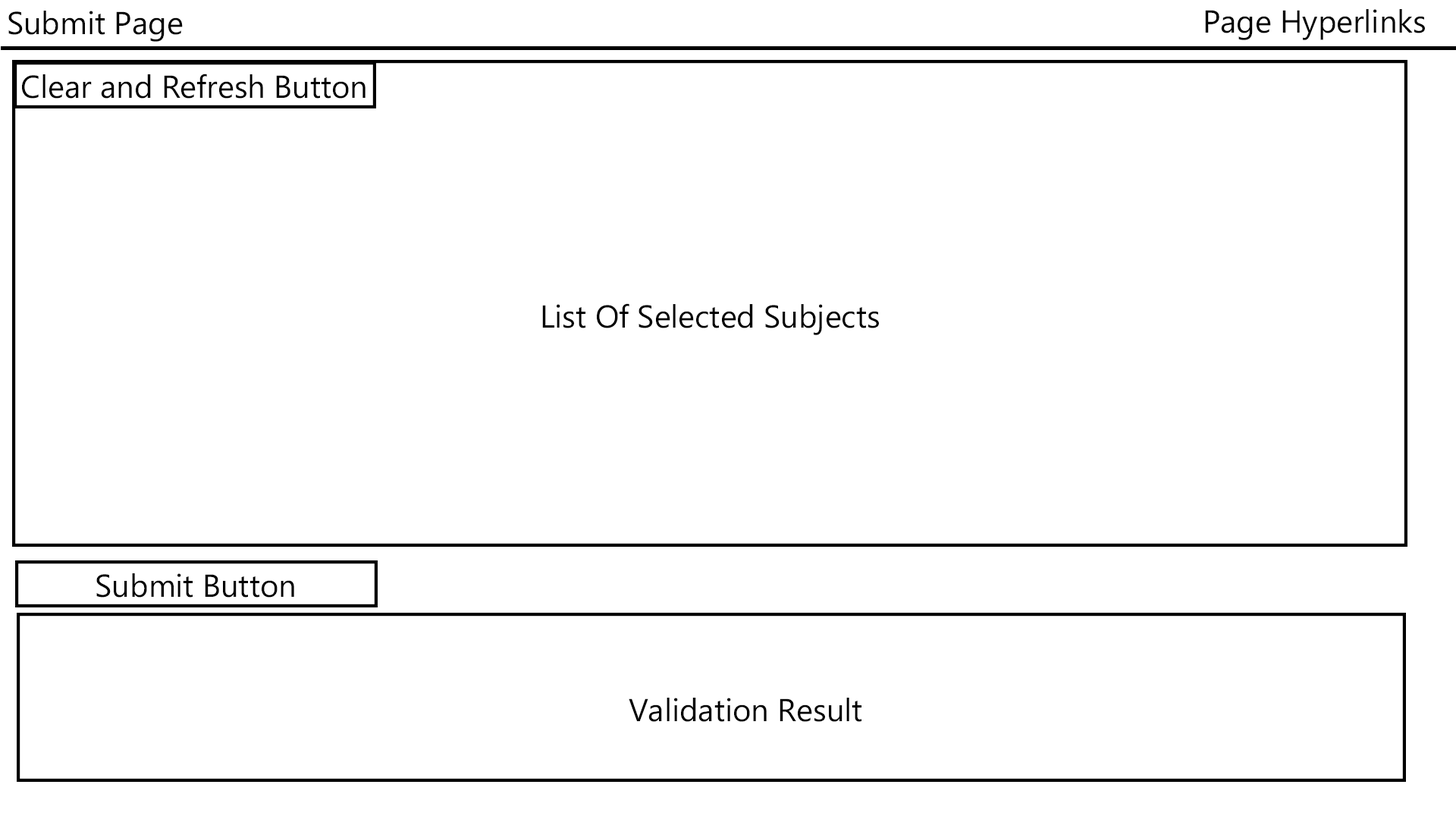
<style>
.page{position:relative;width:1456px;height:819px;background:#ffffff}
.page>*{position:absolute;margin:0}
.t1{font:31.6px "MicrosoftPhagsPa";color:#000000}
</style>
<div class="page">
<p class="t1" style="left:8px;top:11px;width:175px;height:31px">Submit Page</p>
<p class="t1" style="left:1205px;top:9px;width:220px;height:31px">Page Hyperlinks</p>
<p class="t1" style="left:22px;top:74px;width:344px;height:25px">Clear and Refresh Button</p>
<p class="t1" style="left:542px;top:303px;width:337px;height:32px">List Of Selected Subjects</p>
<p class="t1" style="left:96px;top:573px;width:198px;height:25px">Submit Button</p>
<p class="t1" style="left:629px;top:698px;width:232px;height:24px">Validation Result</p>
</div>
